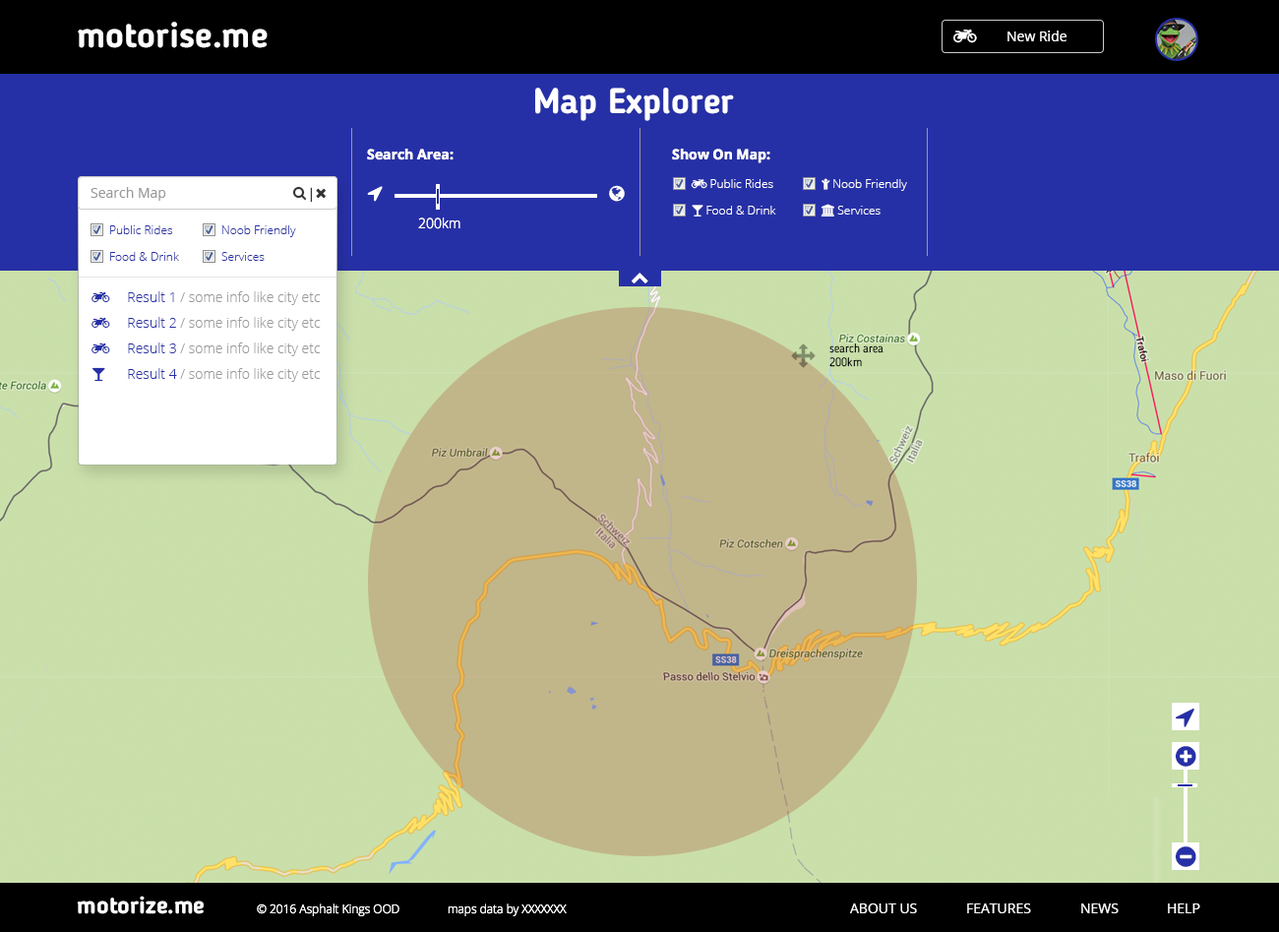
<style>
.page{position:relative;width:1279px;height:932px;background:#cadfaa}
.page>*{position:absolute;margin:0}
.t1{font:35.4px "BloggerSans-Bold";color:#ffffff}
.t2{font:13.8px "OpenSans";color:#ffffff}
.t3{font:13.8px "OpenSans-Bold";color:#ffffff}
.t4{font:13.8px "OpenSans";color:#999999}
.t5{font:13.8px "OpenSans-Light";color:#ffffff}
.t6{font:11.8px "OpenSans-Light";color:#2630a6}
.t7{font:11.8px/13.8px "BloggerSans-Light";color:#000000}
.t8{font:23.6px "BloggerSans-Bold";color:#ffffff}
.t9{font:11.8px "OpenSans-Light";color:#ffffff}
</style>
<div class="page">
<p class="t1" style="left:78px;top:22px;width:190px;height:26px">motorise.me</p>
<p class="t2" style="left:1008px;top:31px;width:59px;height:10px">New Ride</p>
<p class="t1" style="left:535px;top:88px;width:199px;height:33px">Map Explorer</p>
<p class="t3" style="left:367px;top:149px;width:87px;height:11px">Search Area:</p>
<p class="t3" style="left:672px;top:149px;width:99px;height:14px">Show On Map:</p>
<p class="t4" style="left:91px;top:187px;width:75px;height:14px">Search Map</p>
<p class="t5" style="left:418px;top:218px;width:43px;height:11px">200km</p>
<p class="t6" style="left:110px;top:225px;width:63px;height:9px">Public Rides</p>
<p class="t6" style="left:222px;top:225px;width:74px;height:12px">Noob Friendly</p>
<p class="t6" style="left:110px;top:252px;width:69px;height:9px">Food &amp; Drink</p>
<p class="t6" style="left:221px;top:252px;width:44px;height:9px">Services</p>
<p class="t7" style="left:830px;top:343px;width:54px;height:24px">search area <br>200km</p>
<p class="t8" style="left:77px;top:896px;width:127px;height:18px">motorize.me</p>
<p class="t9" style="left:257px;top:903px;width:143px;height:13px">© 2016 Asphalt Kings OOD</p>
<p class="t9" style="left:448px;top:903px;width:119px;height:13px">maps data by XXXXXXX</p>
<p class="t2" style="left:850px;top:903px;width:67px;height:10px">ABOUT US</p>
<p class="t2" style="left:967px;top:903px;width:64px;height:10px">FEATURES</p>
<p class="t2" style="left:1082px;top:903px;width:37px;height:10px">NEWS</p>
<p class="t2" style="left:1168px;top:903px;width:33px;height:10px">HELP</p>
</div>
